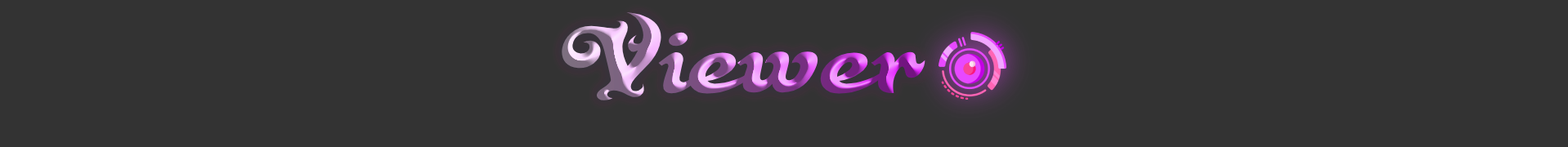
<style>
.page{position:relative;width:1568px;height:147px;background:#333333}
.page>*{position:absolute;margin:0}
.t1{font:108.8px "BlackRose";scale:1.2 1}
</style>
<div class="page">
<p class="t1" style="left:562px;top:11px;width:363px;height:90px">Viewer</p>
</div>
